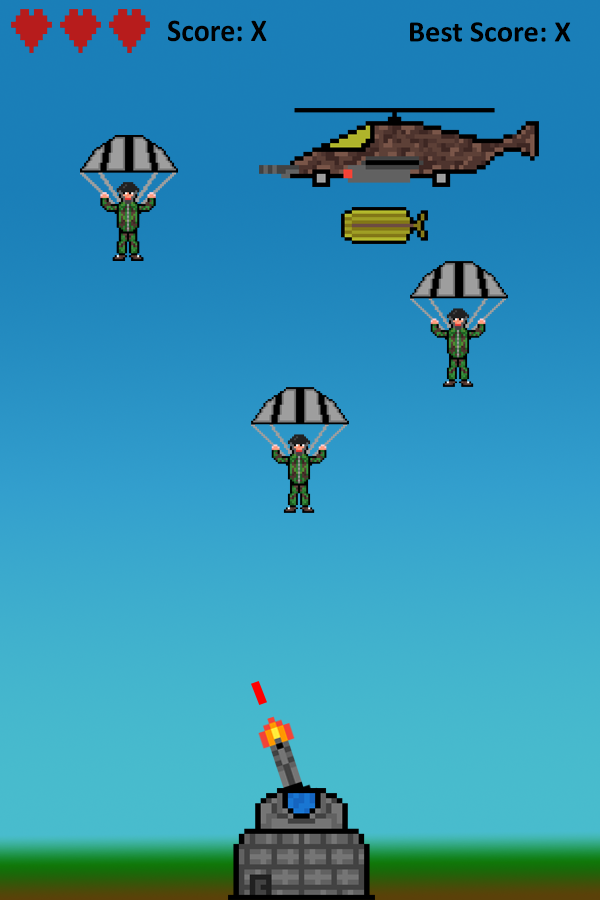
<style>
.page{position:relative;width:600px;height:900px}
.page>*{position:absolute;margin:0}
.t1{font:31.8px "Calibri-Bold";color:#010101;scale:0.95 1}
.t2{font:30px "Calibri-Bold";color:#000000}
</style>
<div class="page">
<p class="t1" style="left:168px;top:20px;width:99px;height:22px">Score: X</p>
<p class="t2" style="left:410px;top:22px;width:161px;height:20px">Best Score: X</p>
</div>
